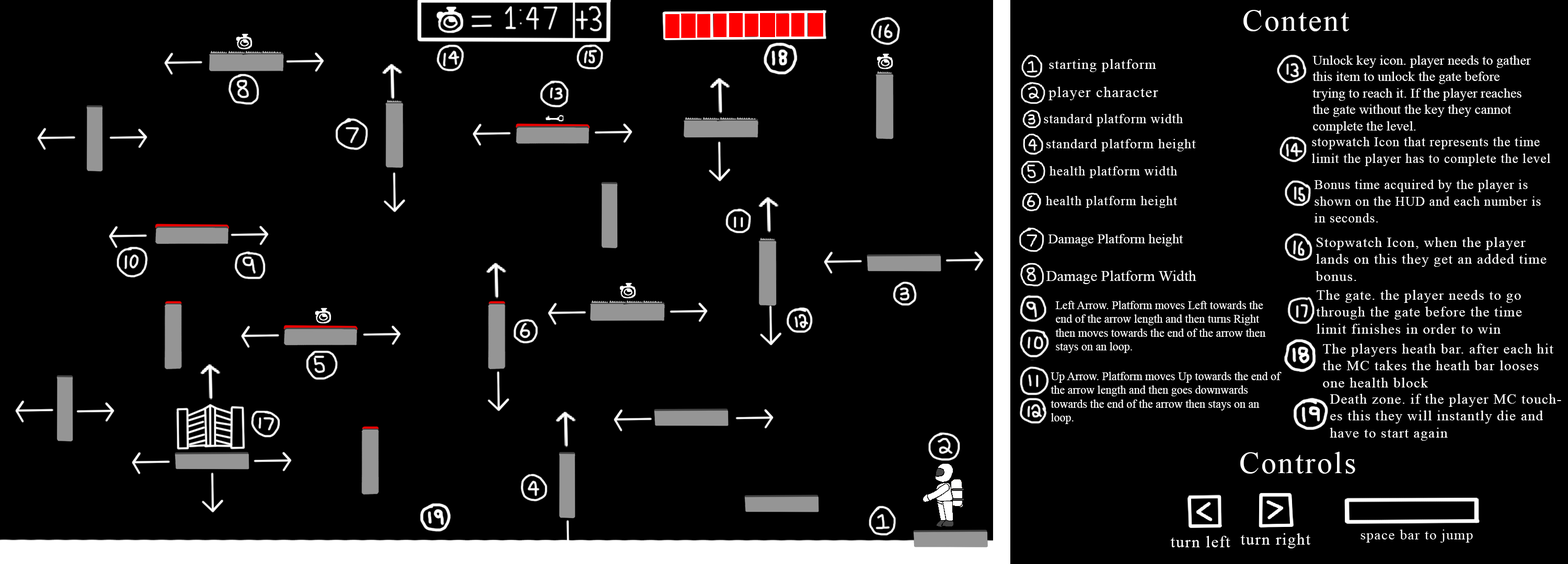
<style>
.page{position:relative;width:1568px;height:564px;background:#000000}
.page>*{position:absolute;margin:0}
.t1{font:30.5px "TimesNewRomanPSMT";letter-spacing:0.055em;color:#ffffff}
.t2{font:14.2px "TimesNewRomanPSMT";letter-spacing:0.055em;color:#ffffff}
.t3{font:13.7px "TimesNewRomanPSMT";color:#ffffff}
.t4{font:15.1px "TimesNewRomanPSMT";letter-spacing:0.055em;color:#ffffff}
.t5{font:13.8px "TimesNewRomanPSMT";letter-spacing:0.055em;color:#ffffff;scale:0.93 1}
.t6{font:13.5px "TimesNewRomanPSMT";letter-spacing:0.055em;color:#ffffff}
.t7{font:13.1px "TimesNewRomanPSMT";letter-spacing:0.055em;color:#ffffff}
.t8{font:15.4px "TimesNewRomanPSMT";color:#ffffff}
.t9{font:11.5px "TimesNewRomanPSMT";color:#ffffff}
.t10{font:16.9px "TimesNewRomanPSMT";letter-spacing:0.055em;color:#ffffff}
</style>
<div class="page">
<p class="t1" style="left:1243px;top:10px;width:107px;height:21px">Content</p>
<p class="t2" style="left:1049px;top:59px;width:107px;height:13px">starting platform</p>
<p class="t3" style="left:1312px;top:55px;width:219px;height:79px">Unlock key icon. player needs to gather this item to unlock the gate before trying to reach it. If the player reaches the gate without the key they cannot complete the level.</p>
<p class="t4" style="left:1048px;top:87px;width:110px;height:13px">player character</p>
<p class="t5" style="left:1044px;top:114px;width:139px;height:12px">standard platform width</p>
<p class="t5" style="left:1312px;top:137px;width:238px;height:29px">stopwatch Icon that represents the time limit the player has to complete the level</p>
<p class="t6" style="left:1046px;top:139px;width:150px;height:13px">standard platform height</p>
<p class="t7" style="left:1050px;top:166px;width:127px;height:12px">health platform width</p>
<p class="t5" style="left:1314px;top:180px;width:227px;height:43px">Bonus time acquired by the player is shown on the HUD and each number is in seconds.</p>
<p class="t7" style="left:1046px;top:196px;width:131px;height:12px">health platform height</p>
<p class="t3" style="left:1048px;top:234px;width:135px;height:13px">Damage Platform height</p>
<p class="t2" style="left:1316px;top:237px;width:231px;height:44px">Stopwatch Icon, when the player lands on this they get an added time bonus.</p>
<p class="t8" style="left:1046px;top:271px;width:150px;height:13px">Damage Platform Width</p>
<p class="t2" style="left:1316px;top:290px;width:206px;height:44px">The gate. the player needs to go through the gate before the time limit finishes in order to win</p>
<p class="t9" style="left:1055px;top:301px;width:211px;height:52px">Left Arrow. Platform moves Left towards the end of the arrow length and then turns Right then moves towards the end of the arrow then stays on an loop.</p>
<p class="t2" style="left:1322px;top:344px;width:231px;height:44px">The players heath bar. after each hit the MC takes the heath bar looses one health block</p>
<p class="t9" style="left:1051px;top:372px;width:231px;height:52px">Up Arrow. Platform moves Up towards the end of the arrow length and then goes downwards towards the end of the arrow then stays on an loop.</p>
<p class="t2" style="left:1330px;top:394px;width:231px;height:47px">Death zone. if the player MC touches this they will instantly die and have to start again</p>
<p class="t1" style="left:1240px;top:452px;width:115px;height:22px">Controls</p>
<p class="t10" style="left:1240px;top:534px;width:70px;height:15px">turn right</p>
<p class="t10" style="left:1170px;top:536px;width:60px;height:12px">turn left</p>
</div>
